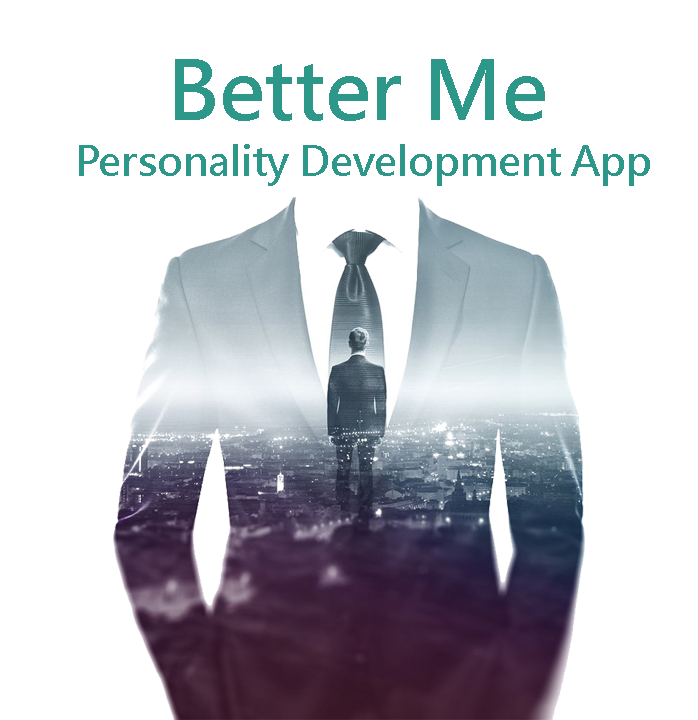
<style>
.page{position:relative;width:698px;height:720px;background:#ffffff}
.page>*{position:absolute;margin:0}
.t1{font:80px "MicrosoftJhengHeiUIBold";color:#2d9889}
.t2{font:40px "MicrosoftJhengHeiUIBold";color:#2d9889}
</style>
<div class="page">
<p class="t1" style="left:175px;top:59px;width:370px;height:62px">Better Me</p>
<p class="t2" style="left:79px;top:144px;width:571px;height:42px">Personality Development App</p>
</div>
